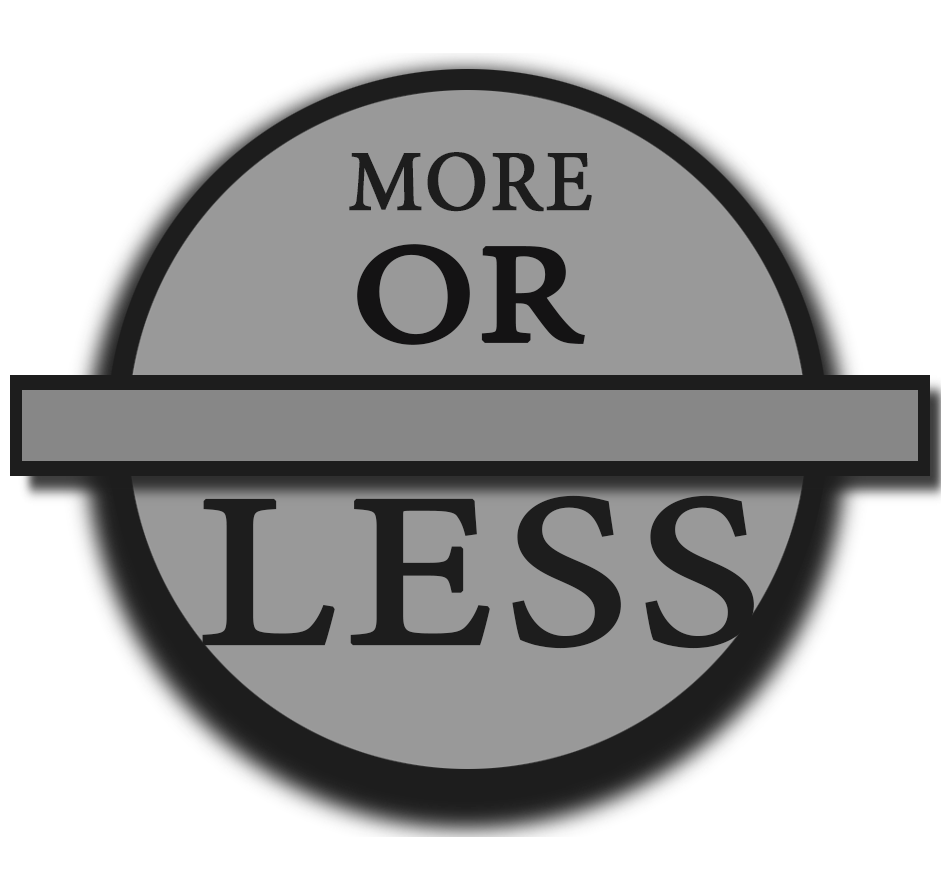
<style>
.page{position:relative;width:941px;height:882px;background:#ffffff}
.page>*{position:absolute;margin:0}
.t1{font:86.4px "MinionPro-Regular";letter-spacing:0.01em;color:#1d1d1d;font-weight:bold}
.t2{font:139.5px "MinionPro-Regular";letter-spacing:0.01em;color:#141314;font-weight:bold;scale:1.16 1}
.t3{font:218.6px "MinionPro-Regular";letter-spacing:0.01em;color:#1d1d1d;font-weight:bold;scale:1.2 1}
</style>
<div class="page">
<p class="t1" style="left:349px;top:152px;width:243px;height:60px">MORE</p>
<p class="t2" style="left:357px;top:244px;width:228px;height:101px">OR</p>
<p class="t3" style="left:202px;top:495px;width:552px;height:154px">LESS</p>
</div>
